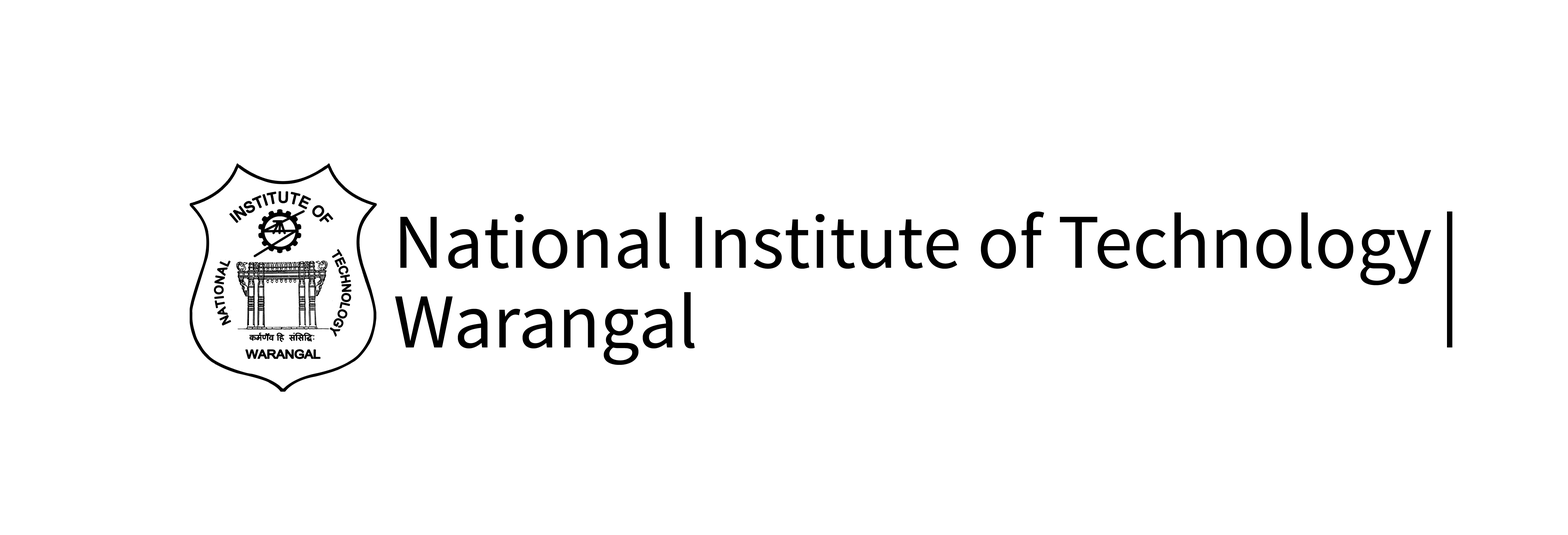
<style>
.page{position:relative;width:1568px;height:535px;background:#ffffff}
.page>*{position:absolute;margin:0}
.t1{font:77.6px/39.8px "SourceSansPro-Regular";color:#000000}
</style>
<div class="page">
<p class="t1" style="left:395px;top:211px;width:1036px;height:154px">National Institute of Technology <br><br>Warangal</p>
</div>
